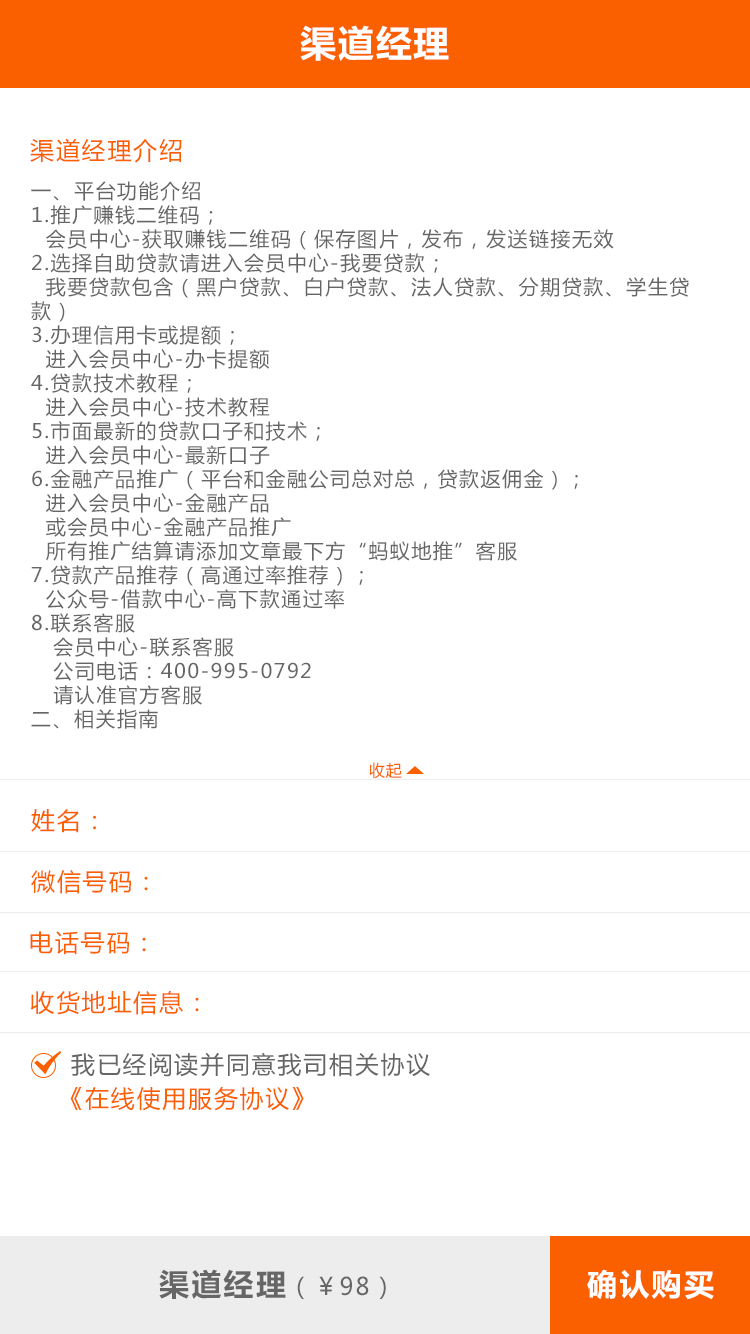
<style>
.page{position:relative;width:750px;height:1334px;background:#ffffff}
.page>*{position:absolute;margin:0}
.t1{font:36px "MicrosoftYaHei-Bold";letter-spacing:0.05em;color:#ffffff}
.t2{font:24px "MicrosoftYaHei";letter-spacing:0.075em;color:#fb6000}
.t3{font:20px/24px "MicrosoftYaHei";letter-spacing:0.075em;color:#666666}
.t4{font:16px "MicrosoftYaHei";letter-spacing:0.05em;color:#fb6000}
.t5{font:24px "MicrosoftYaHei";letter-spacing:0.075em;color:#666666}
.t6{font:30px "MicrosoftYaHei-Bold";letter-spacing:0.075em;color:#666666}
.t7{font:30px "MicrosoftYaHei-Bold";letter-spacing:0.075em;color:#ffffff}
</style>
<div class="page">
<p class="t1" style="left:300px;top:25px;width:149px;height:36px">渠道经理</p>
<p class="t2" style="left:30px;top:138px;width:152px;height:25px">渠道经理介绍</p>
<p class="t3" style="left:31px;top:181px;width:658px;height:548px">一、平台功能介绍<br>1.推广赚钱二维码；<br>  会员中心-获取赚钱二维码（保存图片，发布，发送链接无效<br>2.选择自助贷款请进入会员中心-我要贷款；<br>  我要贷款包含（黑户贷款、白户贷款、法人贷款、分期贷款、学生贷<br>款）<br>3.办理信用卡或提额；<br>  进入会员中心-办卡提额<br>4.贷款技术教程；<br>  进入会员中心-技术教程<br>5.市面最新的贷款口子和技术；<br>  进入会员中心-最新口子<br>6.金融产品推广（平台和金融公司总对总，贷款返佣金）；<br>  进入会员中心-金融产品<br>  或会员中心-金融产品推广<br>  所有推广结算请添加文章最下方“蚂蚁地推”客服<br>7.贷款产品推荐（高通过率推荐）；<br>  公众号-借款中心-高下款通过率<br>8.联系客服<br>   会员中心-联系客服<br>   公司电话：400-995-0792<br>   请认准官方客服<br>二、相关指南</p>
<p class="t4" style="left:369px;top:762px;width:33px;height:17px">收起</p>
<p class="t2" style="left:31px;top:809px;width:65px;height:24px">姓名：</p>
<p class="t2" style="left:31px;top:870px;width:117px;height:24px">微信号码：</p>
<p class="t2" style="left:30px;top:931px;width:116px;height:24px">电话号码：</p>
<p class="t2" style="left:30px;top:990px;width:169px;height:25px">收货地址信息：</p>
<p class="t5" style="left:71px;top:1052px;width:359px;height:25px">我已经阅读并同意我司相关协议</p>
<p class="t2" style="left:70px;top:1086px;width:234px;height:25px">《在线使用服务协议》</p>
<p class="t5" style="left:159px;top:1269px;width:227px;height:30px"><span class="t6">渠道经理</span>（￥98）</p>
<p class="t7" style="left:587px;top:1269px;width:127px;height:31px">确认购买</p>
</div>
